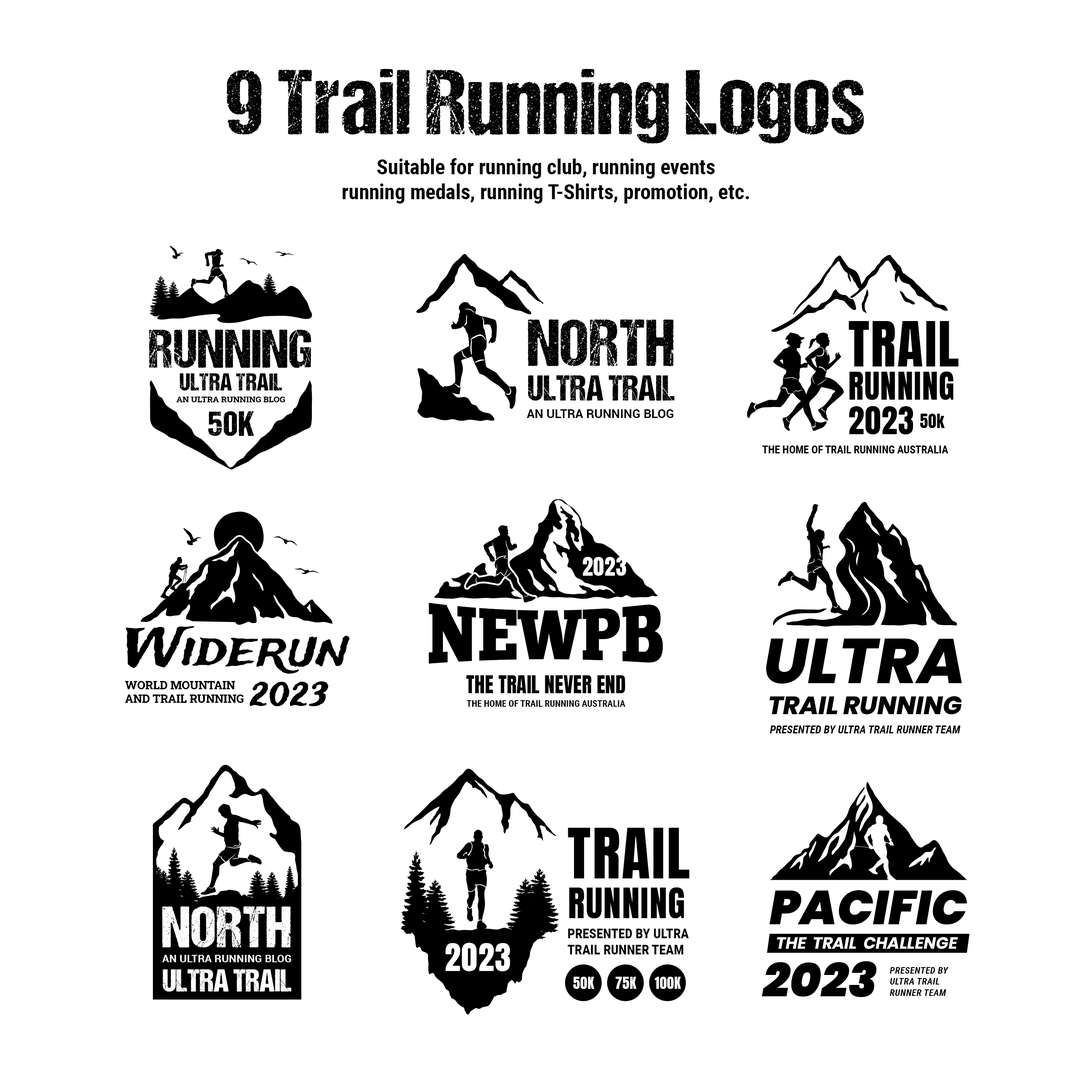
<style>
.page{position:relative;width:1092px;height:1092px;background:#ffffff}
.page>*{position:absolute;margin:0}
.t1{font:92.5px "DCC-Ash";letter-spacing:0.01em;color:#000000}
.t2{font:20.8px "RobotoCondensed-Bold";color:#000000}
.t3{font:54.6px "DCC-Ash";letter-spacing:0.01em;color:#000000}
.t4{font:66.6px "DCC-Ash";letter-spacing:0.01em;color:#000000}
.t5{font:53.3px "Anton-Regular";letter-spacing:0.025em;color:#000000}
.t6{font:24.5px "DCC-Ash";letter-spacing:0.01em;color:#000000}
.t7{font:36.1px "DCC-Ash";color:#000000}
.t8{font:32.1px "Anton-Regular";letter-spacing:0.025em;color:#000000}
.t9{font:8.2px "RobotoSlab-ExtraBold";letter-spacing:0.01em;color:#000000}
.t10{font:35.3px "DCC-Ash";letter-spacing:0.025em;color:#000000}
.t11{font:12px "Roboto-Bold";letter-spacing:0.01em;color:#000000}
.t12{font:16.3px "Anton-Regular";letter-spacing:0.025em;color:#000000}
.t13{font:10.7px "RobotoCondensed-Bold";color:#000000}
.t14{font:21.6px "Anton-Regular";letter-spacing:0.025em;color:#ffffff}
.t15{font:87.6px "ChunkFive-Regular";color:#000000;scale:0.71 1}
.t16{font:52.4px "TradeWinds";color:#000000}
.t17{font:63px "Poppins-ExtraBoldItalic";color:#000000}
.t18{font:20.8px "Anton-Regular";color:#000000}
.t19{font:11.2px "RobotoSlab-ExtraBold";color:#000000}
.t20{font:32.1px "TradeWinds";color:#000000}
.t21{font:9.2px "RobotoCondensed-Bold";color:#000000}
.t22{font:25.2px "Poppins-ExtraBoldItalic";color:#000000}
.t23{font:10.9px "RobotoCondensed-BoldItalic";color:#000000}
.t24{font:58.8px "Anton-Regular";letter-spacing:0.025em;color:#000000}
.t25{font:35.4px "Anton-Regular";letter-spacing:0.025em;color:#000000}
.t26{font:47.7px "Poppins-BlackItalic";color:#000000}
.t27{font:58.5px "DCC-Ash";letter-spacing:0.01em;color:#ffffff}
.t28{font:13.5px "RobotoCondensed-Bold";color:#000000}
.t29{font:16.3px "Poppins-BoldItalic";color:#ffffff}
.t30{font:32.1px "Anton-Regular";letter-spacing:0.025em;color:#ffffff}
.t31{font:10.6px "Roboto-Bold";letter-spacing:0.01em;color:#ffffff}
.t32{font:31.7px "DCC-Ash";color:#ffffff}
.t33{font:13.9px "Anton-Regular";letter-spacing:0.025em;color:#ffffff}
.t34{font:9.2px "RobotoCondensed-BoldItalic";letter-spacing:0.025em;color:#000000}
</style>
<div class="page">
<p class="t1" style="left:227px;top:69px;width:637px;height:75px">9 Trail Running Logos</p>
<p class="t2" style="left:342px;top:158px;width:407px;height:46px;text-align:center">Suitable for running club, running events<br>running medals, running T-Shirts, promotion, etc.</p>
<p class="t3" style="left:149px;top:329px;width:162px;height:39px">RUNNING</p>
<p class="t4" style="left:528px;top:319px;width:146px;height:47px">NORTH</p>
<p class="t5" style="left:849px;top:321px;width:110px;height:45px">TRAIL</p>
<p class="t6" style="left:180px;top:373px;width:102px;height:18px">ULTRA TRAIL</p>
<p class="t7" style="left:528px;top:375px;width:146px;height:26px">ULTRA TRAIL</p>
<p class="t8" style="left:849px;top:371px;width:105px;height:29px">RUNNING</p>
<p class="t9" style="left:176px;top:397px;width:109px;height:5px">AN ULTRA RUNNING BLOG</p>
<p class="t10" style="left:208px;top:411px;width:46px;height:25px">50K</p>
<p class="t11" style="left:527px;top:409px;width:147px;height:9px">AN ULTRA RUNNING BLOG</p>
<p class="t8" style="left:849px;top:406px;width:64px;height:29px">2023</p>
<p class="t12" style="left:920px;top:414px;width:25px;height:14px">50k</p>
<p class="t13" style="left:762px;top:446px;width:186px;height:7px">THE HOME OF TRAIL RUNNING AUSTRALIA</p>
<p class="t14" style="left:583px;top:557px;width:43px;height:19px">2023</p>
<p class="t15" style="left:428px;top:603px;width:235px;height:61px">NEWPB</p>
<p class="t16" style="left:125px;top:626px;width:225px;height:48px">Widerun</p>
<p class="t17" style="left:766px;top:638px;width:196px;height:46px">ULTRA</p>
<p class="t18" style="left:466px;top:675px;width:159px;height:18px">THE TRAIL NEVER END</p>
<p class="t19" style="left:125px;top:681px;width:119px;height:22px">WORLD MOUNTAIN<br>AND TRAIL RUNNING</p>
<p class="t20" style="left:249px;top:681px;width:79px;height:25px">2023</p>
<p class="t21" style="left:466px;top:700px;width:159px;height:7px">THE HOME OF TRAIL RUNNING AUSTRALIA</p>
<p class="t22" style="left:769px;top:696px;width:193px;height:19px">TRAIL RUNNING</p>
<p class="t23" style="left:770px;top:726px;width:191px;height:7px">PRESENTED BY ULTRA TRAIL RUNNER TEAM</p>
<p class="t24" style="left:568px;top:828px;width:122px;height:50px">TRAIL</p>
<p class="t25" style="left:569px;top:887px;width:115px;height:32px">RUNNING</p>
<p class="t26" style="left:769px;top:890px;width:198px;height:35px">PACIFIC</p>
<p class="t27" style="left:162px;top:906px;width:129px;height:42px">NORTH</p>
<p class="t28" style="left:567px;top:929px;width:122px;height:25px">PRESENTED BY ULTRA<br>TRAIL RUNNER TEAM</p>
<p class="t29" style="left:777px;top:937px;width:181px;height:12px">THE  TRAIL  CHALLENGE</p>
<p class="t30" style="left:446px;top:943px;width:64px;height:28px">2023</p>
<p class="t31" style="left:162px;top:955px;width:129px;height:7px">AN ULTRA RUNNING BLOG</p>
<p class="t26" style="left:762px;top:961px;width:115px;height:36px">2023</p>
<p class="t32" style="left:162px;top:969px;width:129px;height:23px">ULTRA TRAIL</p>
<p class="t33" style="left:573px;top:977px;width:21px;height:12px">50K</p>
<p class="t33" style="left:615px;top:977px;width:21px;height:12px">75K</p>
<p class="t33" style="left:655px;top:977px;width:26px;height:12px">100K</p>
<p class="t34" style="left:890px;top:967px;width:59px;height:29px">PRESENTED BY <br>ULTRA TRAIL <br>RUNNER TEAM</p>
</div>
